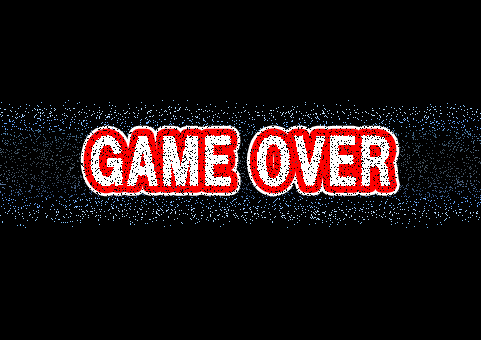
<style>
.page{position:relative;width:481px;height:340px;background:#000000}
.page>*{position:absolute;margin:0}
.t1{font:59.9px "HGSSoeiKakugothicUB";letter-spacing:0.03em;color:#ffffff;font-weight:bold;scale:0.89 1}
</style>
<div class="page">
<p class="t1" style="left:90px;top:135px;width:300px;height:52px;opacity:0.88">GAME OVER</p>
</div>
